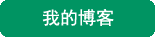
<style>
.page{position:relative;width:155px;height:37px;background:#009462}
.page>*{position:absolute;margin:0}
.t1{font:18px "SimHei";color:#ffffff}
</style>
<div class="page">
<p class="t1" style="left:42px;top:9px;width:72px;height:17px">我的博客</p>
</div>
